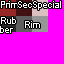
<style>
.page{position:relative;width:64px;height:64px;background:#ff00ff}
.page>*{position:absolute;margin:0}
.t1{font:9px "ArialMT";color:#ffffff}
.t2{font:9px/9px "ArialMT";color:#ffffff}
</style>
<div class="page">
<p class="t1" style="left:1px;top:1px;width:17px;height:7px">Prim</p>
<p class="t1" style="left:18px;top:1px;width:14px;height:7px">Sec</p>
<p class="t1" style="left:33px;top:1px;width:28px;height:9px">Special</p>
<p class="t2" style="left:0px;top:17px;width:16px;height:16px">Rub<br>ber</p>
<p class="t1" style="left:25px;top:21px;width:15px;height:7px">Rim</p>
</div>
